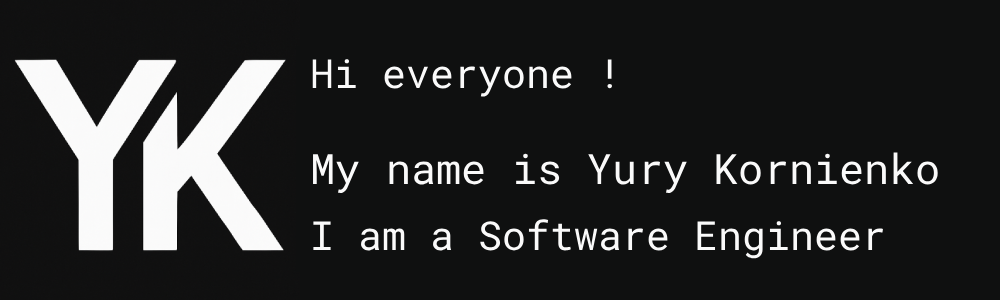
<style>
.page{position:relative;width:1000px;height:300px;background:#0f1010}
.page>*{position:absolute;margin:0}
.t1{font:40px "RobotoMono-Regular";color:#fafafa}
.t2{font:42px "RobotoMono-Regular";color:#fafafa}
</style>
<div class="page">
<p class="t1" style="left:312px;top:59px;width:300px;height:38px">Hi everyone !</p>
<p class="t2" style="left:313px;top:152px;width:625px;height:41px">My name is Yury Kornienko</p>
<p class="t1" style="left:313px;top:219px;width:570px;height:40px">I am a Software Engineer</p>
</div>
